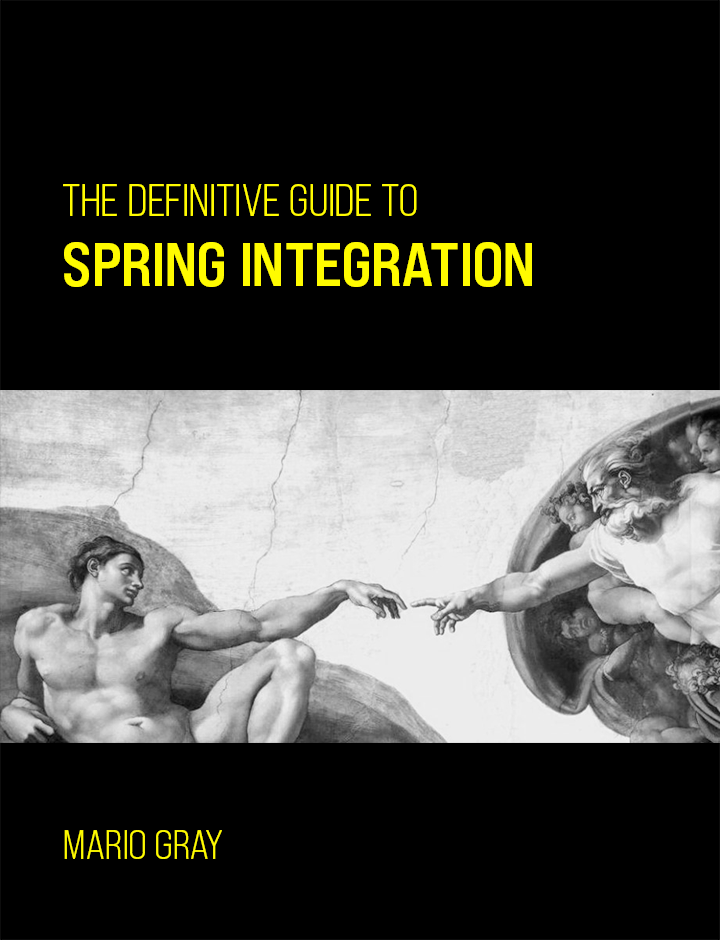
<style>
.page{position:relative;width:720px;height:940px;background:#000000}
.page>*{position:absolute;margin:0}
.t1{font:45.6px "BebasNeuePro-SmEBk";color:#fffb00;text-transform:uppercase}
.t2{font:62.1px "BebasNeuePro-ExpBd";color:#fffb00;text-transform:uppercase}
.t3{font:41.3px "BebasNeuePro-SmEBk";color:#fffb00;text-transform:uppercase}
</style>
<div class="page">
<p class="t1" style="left:63px;top:184px;width:354px;height:32px">the definitive guide to</p>
<p class="t2" style="left:64px;top:242px;width:468px;height:45px">Spring Integration</p>
<p class="t3" style="left:64px;top:830px;width:158px;height:29px">mario gray</p>
</div>
